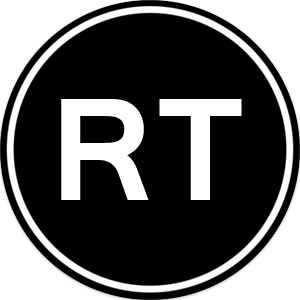
<style>
.page{position:relative;width:300px;height:300px;background:#000000}
.page>*{position:absolute;margin:0}
.t1{font:156.8px "Latha-Bold";color:#ffffff}
</style>
<div class="page">
<p class="t1" style="left:61px;top:99px;width:181px;height:101px">RT</p>
</div>
